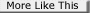
<style>
.page{position:relative;width:90px;height:13px;background:#efefef}
.page>*{position:absolute;margin:0}
.t1{font:10px "Verdana";color:#000000}
</style>
<div class="page">
<p class="t1" style="left:7px;top:1px;width:71px;height:8px">More Like This</p>
</div>
